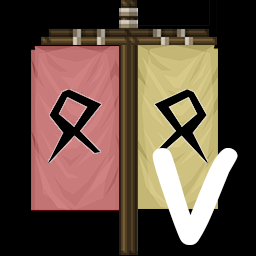
<style>
.page{position:relative;width:256px;height:256px;background:#000000}
.page>*{position:absolute;margin:0}
.t1{font:125px "ComickBookBDcraft";color:#ffffff}
</style>
<div class="page">
<p class="t1" style="left:152px;top:148px;width:86px;height:97px">V</p>
</div>
